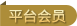
<style>
.page{position:relative;width:77px;height:26px;background:#ad8d39}
.page>*{position:absolute;margin:0}
.t1{font:14px "MicrosoftJhengHeiRegular";font-weight:bold}
</style>
<div class="page">
<p class="t1" style="left:9px;top:9px;width:57px;height:14px">平台会员</p>
</div>
